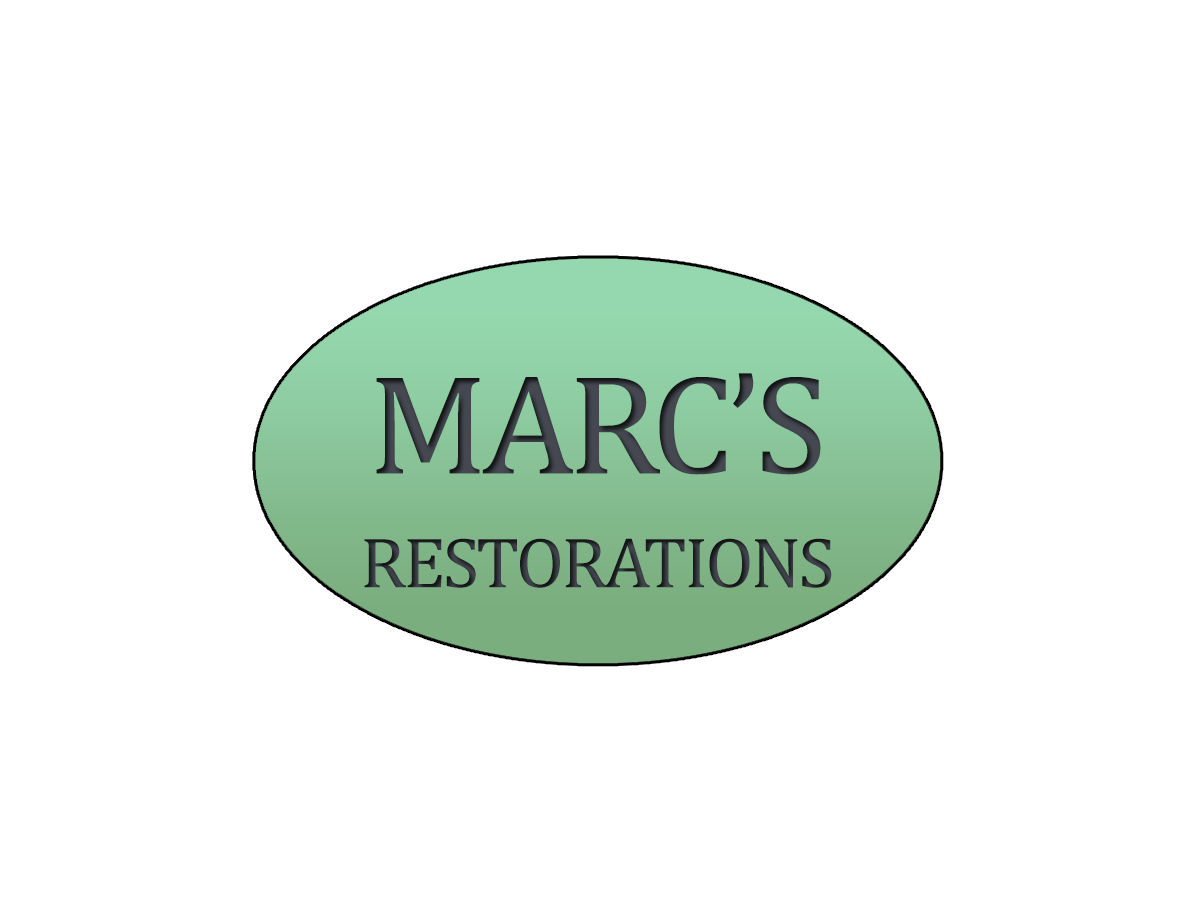
<style>
.page{position:relative;width:1200px;height:900px;background:#ffffff}
.page>*{position:absolute;margin:0}
.t1{font:143.1px "Cambria";letter-spacing:-0.04em;color:#3e4048}
.t2{font:72px "Cambria";letter-spacing:-0.04em;scale:1.03 1}
</style>
<div class="page">
<p class="t1" style="left:376px;top:373px;width:445px;height:102px">MARC’S</p>
<p class="t2" style="left:364px;top:538px;width:468px;height:50px">RESTORATIONS</p>
</div>
